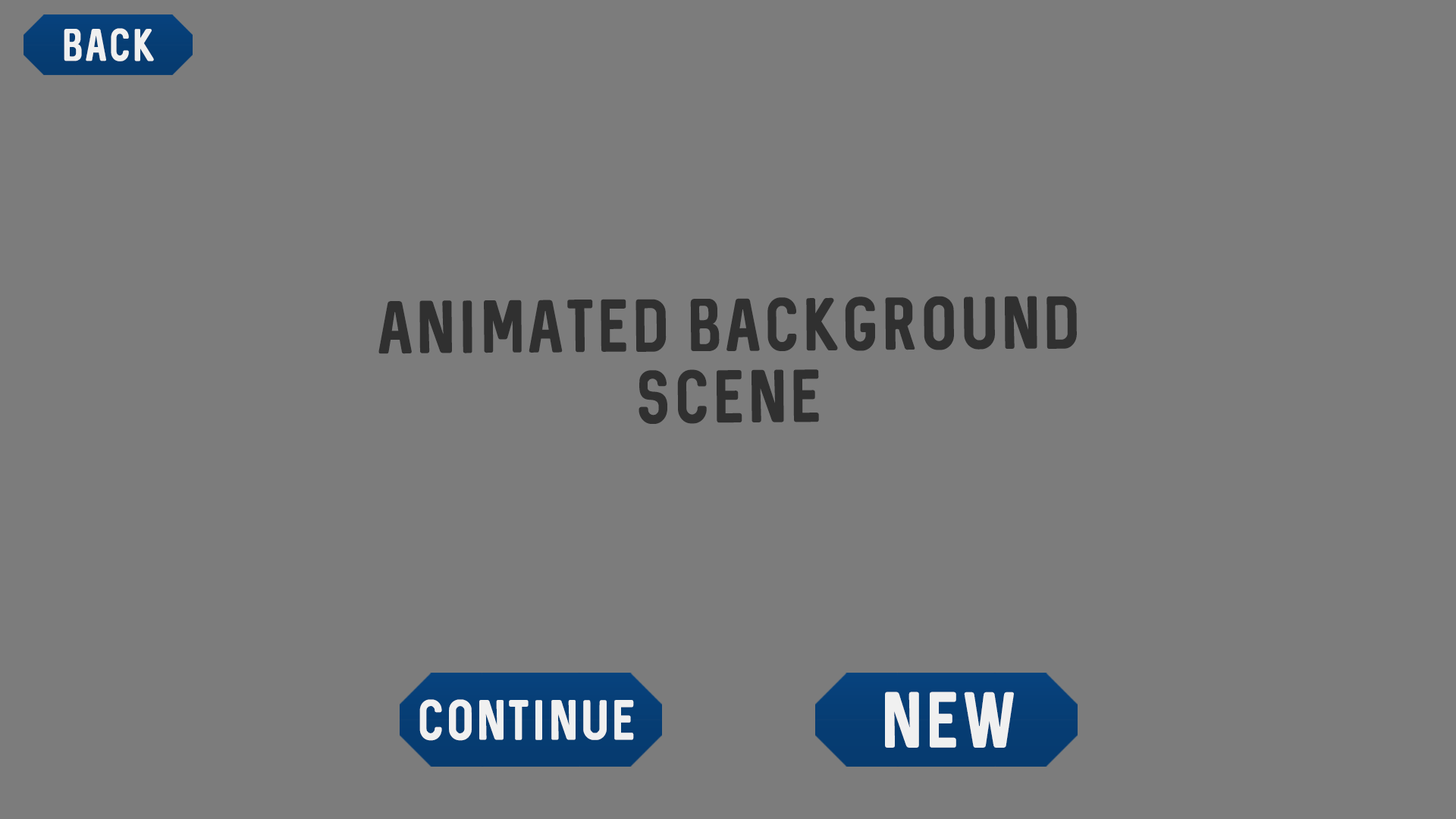
<style>
.page{position:relative;width:1456px;height:819px;background:#7c7c7c}
.page>*{position:absolute;margin:0}
.t1{font:36.4px "Sequel-Regular";letter-spacing:0.075em;color:#f0f0f0;text-transform:uppercase;scale:0.95 1}
.t2{font:59.7px "Sequel-Regular";letter-spacing:0.075em;color:#303030;text-transform:uppercase;scale:0.95 1}
.t3{font:45.3px "Sequel-Regular";letter-spacing:0.075em;color:#f0f0f0;text-transform:uppercase;scale:0.95 1}
.t4{font:63.3px "Sequel-Regular";letter-spacing:0.075em;color:#f0f0f0;text-transform:uppercase;scale:0.95 1}
</style>
<div class="page">
<p class="t1" style="left:64px;top:28px;width:90px;height:33px">back</p>
<p class="t2" style="left:378px;top:296px;width:699px;height:128px;text-align:center">animated background<br>scene</p>
<p class="t3" style="left:419px;top:699px;width:215px;height:42px">Continue</p>
<p class="t4" style="left:885px;top:692px;width:129px;height:56px">new</p>
</div>
